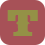
<style>
.page{position:relative;width:45px;height:45px;background:#a75157}
.page>*{position:absolute;margin:0}
.t1{font:50px "Saddlebag-Black";color:#949146}
</style>
<div class="page">
<p class="t1" style="left:7px;top:10px;width:31px;height:26px">T</p>
</div>
